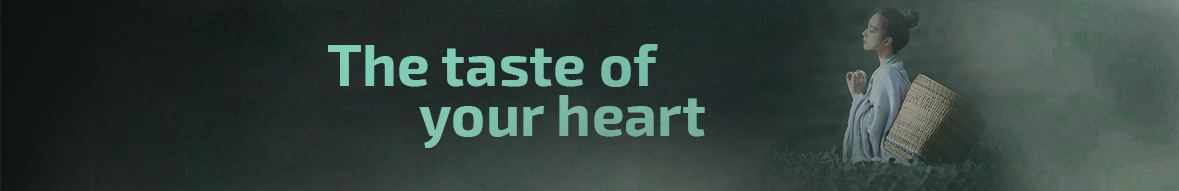
<style>
.page{position:relative;width:1179px;height:191px}
.page>*{position:absolute;margin:0}
.t1{font:58.3px/50px "Exo2-Bold";color:#83d5bd}
</style>
<div class="page">
<p class="t1" style="left:328px;top:44px;width:377px;height:104px;text-align:right">The taste of    <br>          your heart</p>
</div>
